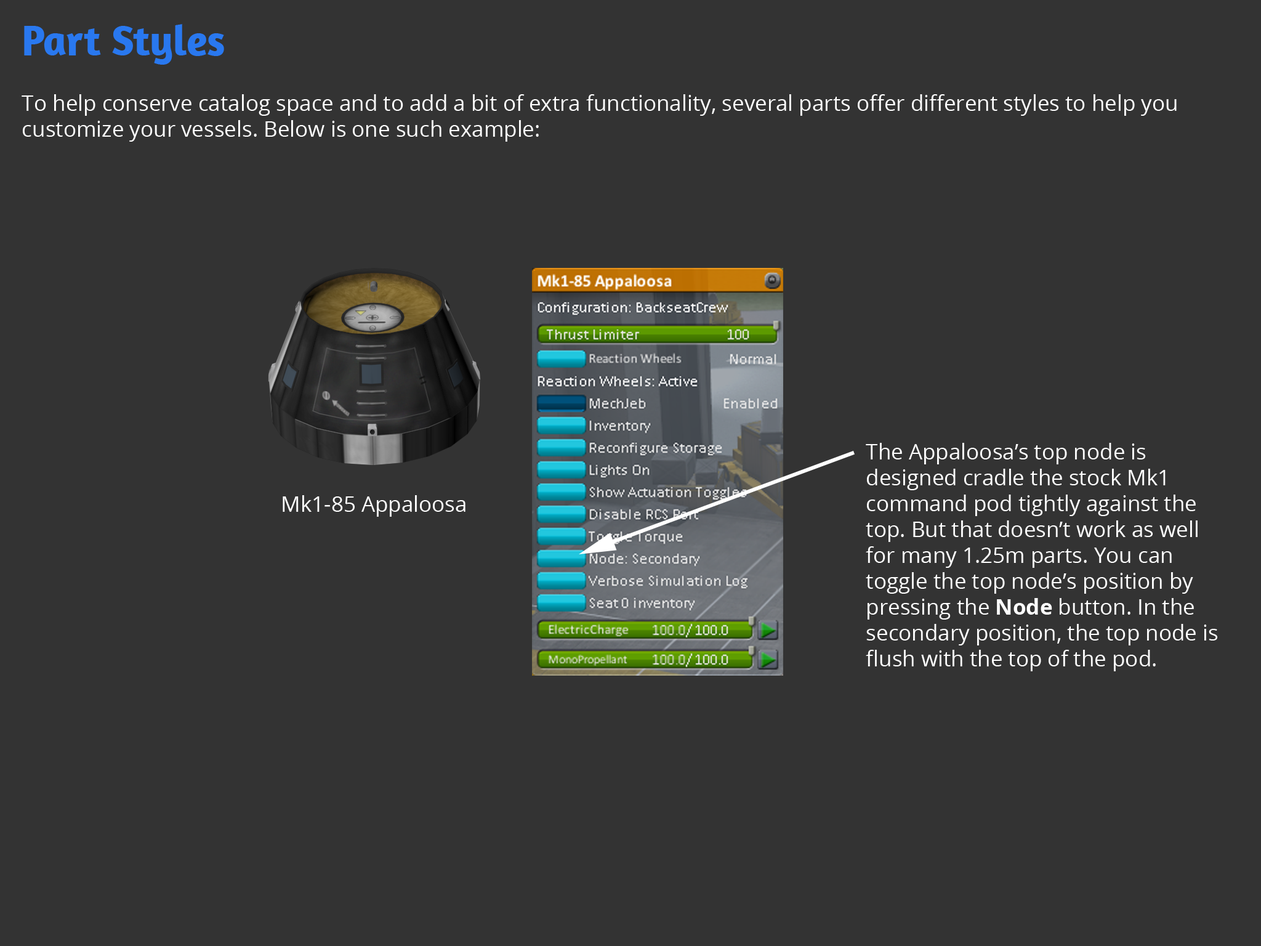
<style>
.page{position:relative;width:1261px;height:946px;background:#333333}
.page>*{position:absolute;margin:0}
.t1{font:43.1px "Amaranth-Bold";color:#2978ef}
.t2{font:21.5px "OpenSans";color:#ffffff}
.t3{font:21.5px "OpenSans-Bold";color:#ffffff}
</style>
<div class="page">
<p class="t1" style="left:24px;top:24px;width:200px;height:41px">Part Styles</p>
<p class="t2" style="left:22px;top:94px;width:1155px;height:48px">To help conserve catalog space and to add a bit of extra functionality, several parts offer different styles to help you customize your vessels. Below is one such example:</p>
<p class="t2" style="left:866px;top:443px;width:352px;height:228px">The Appaloosa’s top node is designed cradle the stock Mk1 command pod tightly against the top. But that doesn’t work as well for many 1.25m parts. You can toggle the top node’s position by pressing the <span class="t3">Node </span>button. In the secondary position, the top node is flush with the top of the pod.</p>
<p class="t2" style="left:283px;top:495px;width:182px;height:22px">Mk1-85 Appaloosa</p>
</div>
